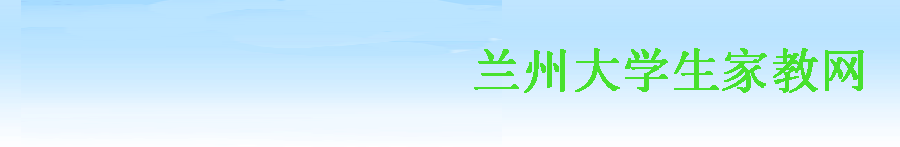
<style>
.page{position:relative;width:900px;height:147px}
.page>*{position:absolute;margin:0}
.t1{font:48px "SimSun";letter-spacing:0.005em;color:#47e12e;font-weight:bold}
</style>
<div class="page">
<p class="t1" style="left:474px;top:48px;width:390px;height:45px">兰州大学生家教网</p>
</div>
